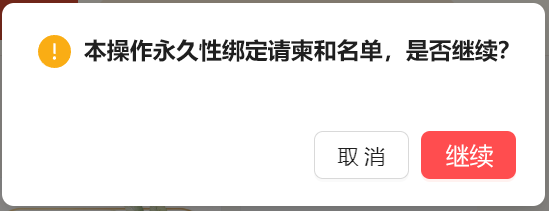
<style>
.page{position:relative;width:549px;height:211px;background:#ffffff}
.page>*{position:absolute;margin:0}
.t1{font:23px "MicrosoftYaHei-Bold";color:#1f1f1f}
.t2{font:24px "MicrosoftYaHei";color:#ffffff}
</style>
<div class="page">
<p class="t1" style="left:84px;top:39px;width:425px;height:23px">本操作永久性绑定请柬和名单，是否继续？</p>
<p class="t2" style="left:446px;top:144px;width:47px;height:24px">继续</p>
</div>
